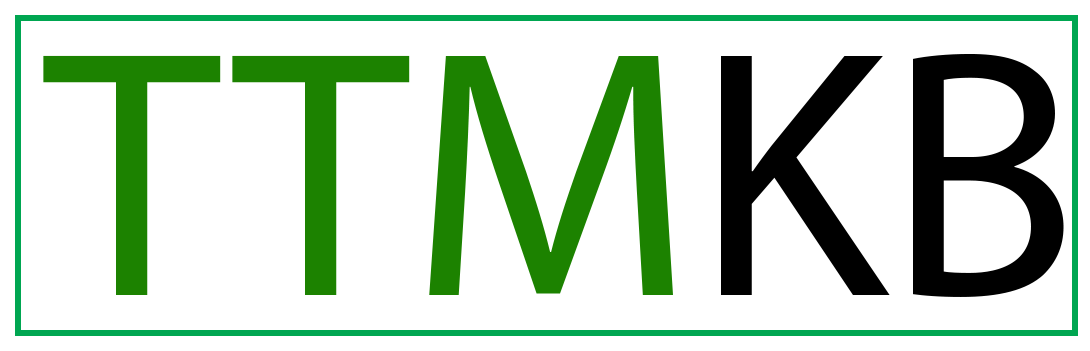
<style>
.page{position:relative;width:1090px;height:351px;background:#ffffff}
.page>*{position:absolute;margin:0}
.t1{font:354.2px "MyriadPro-Regular";color:#1c8200}
.t2{font:354.2px "MyriadPro-Regular";color:#000000}
</style>
<div class="page">
<p class="t1" style="left:43px;top:54px;width:1021px;height:243px">TTM<span class="t2">KB</span></p>
</div>
